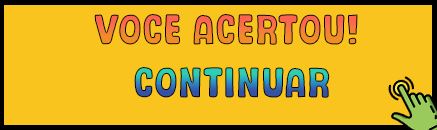
<style>
.page{position:relative;width:437px;height:130px;background:#f9c41e}
.page>*{position:absolute;margin:0}
.t1{font:40px "Chatlong"}
</style>
<div class="page">
<p class="t1" style="left:94px;top:14px;width:264px;height:31px">VOCE ACERTOU!</p>
<p class="t1" style="left:134px;top:67px;width:196px;height:31px">CONTINUAR</p>
</div>
